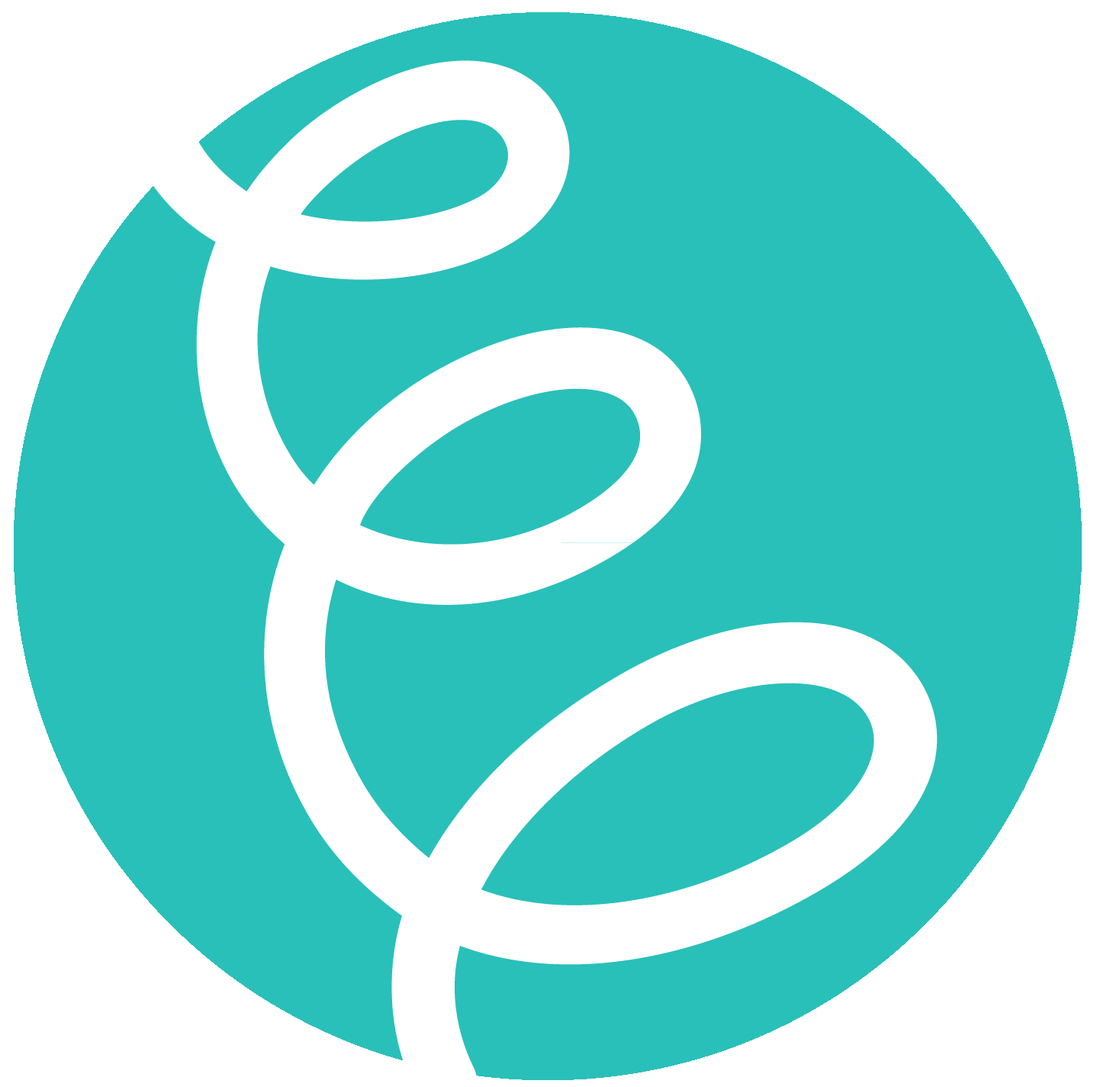
<style>
.page{position:relative;width:1097px;height:1087px;background:#29c0b9}
.page>*{position:absolute;margin:0}
.t1{font:1404.2px "GiddyupStd";color:#ffffff}
</style>
<div class="page">
<p class="t1" style="left:140px;top:60px;width:798px;height:1027px;rotate:-30deg">E</p>
</div>
